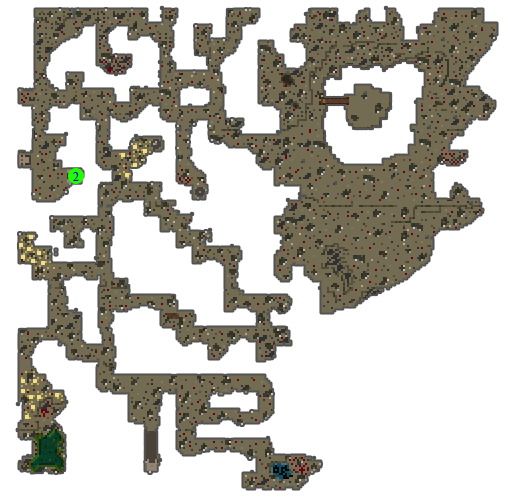
<style>
.page{position:relative;width:508px;height:499px;background:#ffffff}
.page>*{position:absolute;margin:0}
.t1{font:20px "TimesNewRomanPSMT";color:#0101dd}
</style>
<div class="page">
<p class="t1" style="left:73px;top:172px;width:6px;height:9px">2</p>
</div>
